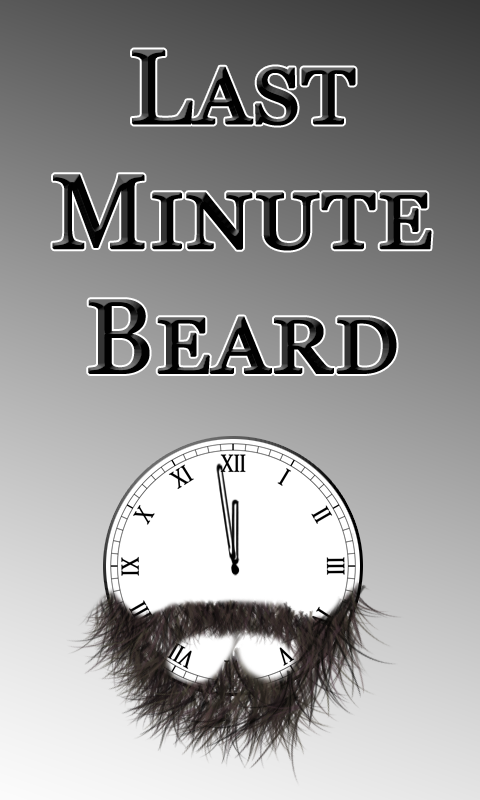
<style>
.page{position:relative;width:480px;height:800px}
.page>*{position:absolute;margin:0}
.t1{font:104px "Georgia";color:#010101;font-variant:small-caps;font-weight:bold}
</style>
<div class="page">
<p class="t1" style="left:52px;top:49px;width:380px;height:325px;text-align:center">Last<br>Minute<br>Beard</p>
</div>
